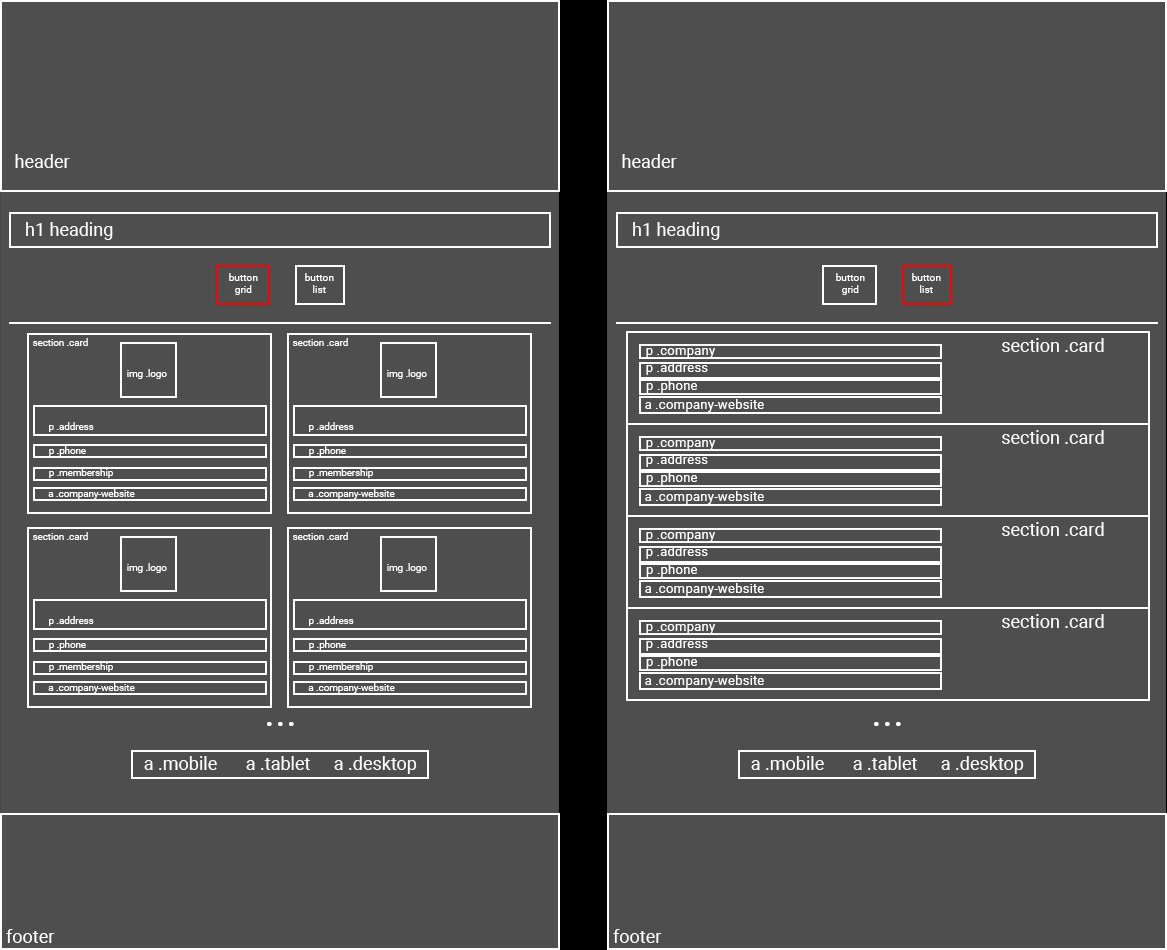
<style>
.page{position:relative;width:1167px;height:950px;background:#4e4e4e}
.page>*{position:absolute;margin:0}
.t1{font:18px "Roboto-Regular";color:#ffffff}
.t2{font:10.2px "Roboto-Regular";color:#ffffff}
.t3{font:9.7px "Roboto-Regular";color:#ffffff}
.t4{font:13.5px "Roboto-Regular";color:#ffffff}
.t5{font:42px "Roboto-Regular";color:#ffffff}
</style>
<div class="page">
<p class="t1" style="left:15px;top:154px;width:55px;height:14px">header</p>
<p class="t1" style="left:622px;top:154px;width:55px;height:14px">header</p>
<p class="t1" style="left:26px;top:222px;width:87px;height:18px">h1 heading</p>
<p class="t1" style="left:633px;top:222px;width:87px;height:18px">h1 heading</p>
<p class="t2" style="left:229px;top:273px;width:29px;height:22px;text-align:center">button<br>grid</p>
<p class="t2" style="left:305px;top:273px;width:29px;height:20px;text-align:center">button<br>list</p>
<p class="t2" style="left:836px;top:273px;width:29px;height:22px;text-align:center">button<br>grid</p>
<p class="t2" style="left:912px;top:273px;width:29px;height:20px;text-align:center">button<br>list</p>
<p class="t3" style="left:32px;top:338px;width:56px;height:8px">section .card</p>
<p class="t3" style="left:292px;top:338px;width:56px;height:8px">section .card</p>
<p class="t1" style="left:1002px;top:338px;width:102px;height:14px">section .card</p>
<p class="t4" style="left:646px;top:348px;width:70px;height:10px">p .company</p>
<p class="t4" style="left:646px;top:362px;width:62px;height:13px">p .address</p>
<p class="t3" style="left:127px;top:369px;width:40px;height:10px">img .logo</p>
<p class="t3" style="left:387px;top:369px;width:40px;height:10px">img .logo</p>
<p class="t4" style="left:646px;top:380px;width:51px;height:13px">p .phone</p>
<p class="t4" style="left:645px;top:399px;width:119px;height:13px">a .company-website</p>
<p class="t3" style="left:49px;top:422px;width:45px;height:10px">p .address</p>
<p class="t3" style="left:309px;top:422px;width:45px;height:10px">p .address</p>
<p class="t1" style="left:1002px;top:430px;width:102px;height:14px">section .card</p>
<p class="t3" style="left:49px;top:446px;width:37px;height:10px">p .phone</p>
<p class="t3" style="left:309px;top:446px;width:37px;height:10px">p .phone</p>
<p class="t4" style="left:646px;top:440px;width:70px;height:10px">p .company</p>
<p class="t4" style="left:646px;top:454px;width:62px;height:13px">p .address</p>
<p class="t3" style="left:49px;top:468px;width:64px;height:10px">p .membership</p>
<p class="t3" style="left:309px;top:468px;width:64px;height:10px">p .membership</p>
<p class="t4" style="left:646px;top:472px;width:51px;height:13px">p .phone</p>
<p class="t3" style="left:48px;top:489px;width:87px;height:10px">a .company-website</p>
<p class="t3" style="left:308px;top:489px;width:87px;height:10px">a .company-website</p>
<p class="t4" style="left:645px;top:491px;width:119px;height:13px">a .company-website</p>
<p class="t3" style="left:32px;top:532px;width:56px;height:8px">section .card</p>
<p class="t3" style="left:292px;top:532px;width:56px;height:8px">section .card</p>
<p class="t4" style="left:646px;top:532px;width:70px;height:10px">p .company</p>
<p class="t1" style="left:1002px;top:522px;width:102px;height:14px">section .card</p>
<p class="t4" style="left:646px;top:546px;width:62px;height:13px">p .address</p>
<p class="t3" style="left:127px;top:563px;width:40px;height:10px">img .logo</p>
<p class="t3" style="left:387px;top:563px;width:40px;height:10px">img .logo</p>
<p class="t4" style="left:646px;top:564px;width:51px;height:13px">p .phone</p>
<p class="t4" style="left:645px;top:583px;width:119px;height:13px">a .company-website</p>
<p class="t3" style="left:49px;top:616px;width:45px;height:10px">p .address</p>
<p class="t3" style="left:309px;top:616px;width:45px;height:10px">p .address</p>
<p class="t1" style="left:1002px;top:614px;width:102px;height:14px">section .card</p>
<p class="t4" style="left:646px;top:624px;width:70px;height:10px">p .company</p>
<p class="t3" style="left:49px;top:640px;width:37px;height:10px">p .phone</p>
<p class="t3" style="left:309px;top:640px;width:37px;height:10px">p .phone</p>
<p class="t4" style="left:646px;top:638px;width:62px;height:13px">p .address</p>
<p class="t3" style="left:49px;top:662px;width:64px;height:10px">p .membership</p>
<p class="t3" style="left:309px;top:662px;width:64px;height:10px">p .membership</p>
<p class="t4" style="left:646px;top:656px;width:51px;height:13px">p .phone</p>
<p class="t4" style="left:645px;top:675px;width:119px;height:13px">a .company-website</p>
<p class="t3" style="left:48px;top:683px;width:87px;height:10px">a .company-website</p>
<p class="t3" style="left:308px;top:683px;width:87px;height:10px">a .company-website</p>
<p class="t5" style="left:267px;top:722px;width:27px;height:4px">...</p>
<p class="t5" style="left:874px;top:722px;width:27px;height:4px">...</p>
<p class="t1" style="left:144px;top:756px;width:73px;height:14px">a .mobile</p>
<p class="t1" style="left:246px;top:756px;width:64px;height:14px">a .tablet</p>
<p class="t1" style="left:334px;top:756px;width:83px;height:18px">a .desktop</p>
<p class="t1" style="left:751px;top:756px;width:73px;height:14px">a .mobile</p>
<p class="t1" style="left:853px;top:756px;width:64px;height:14px">a .tablet</p>
<p class="t1" style="left:941px;top:756px;width:83px;height:18px">a .desktop</p>
<p class="t1" style="left:6px;top:929px;width:49px;height:14px">footer</p>
<p class="t1" style="left:613px;top:929px;width:49px;height:14px">footer</p>
</div>
